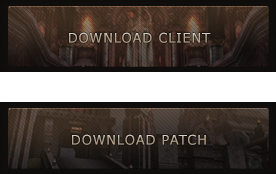
<style>
.page{position:relative;width:276px;height:174px}
.page>*{position:absolute;margin:0}
.t1{font:13px "Verdana";letter-spacing:0.06em}
</style>
<div class="page">
<p class="t1" style="left:69px;top:32px;width:142px;height:11px">DOWNLOAD CLIENT</p>
<p class="t1" style="left:72px;top:134px;width:134px;height:11px">DOWNLOAD PATCH</p>
</div>
